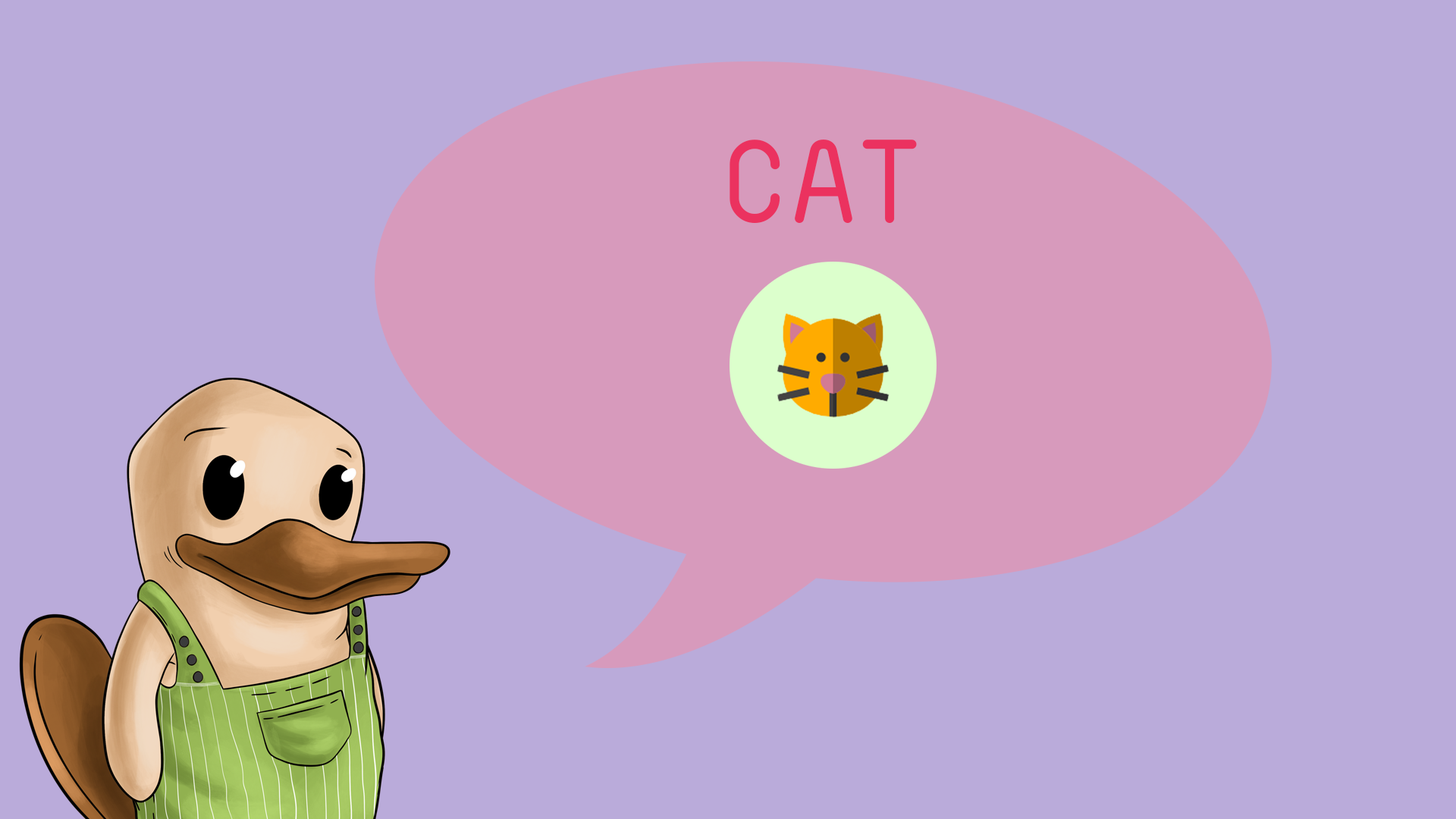
<style>
.page{position:relative;width:1456px;height:819px;background:#baabda}
.page>*{position:absolute;margin:0}
.t1{font:113.7px "WidaRoundDemo";letter-spacing:0.08em;color:#eb325f}
</style>
<div class="page">
<p class="t1" style="left:730px;top:140px;width:187px;height:83px">CAT</p>
</div>
